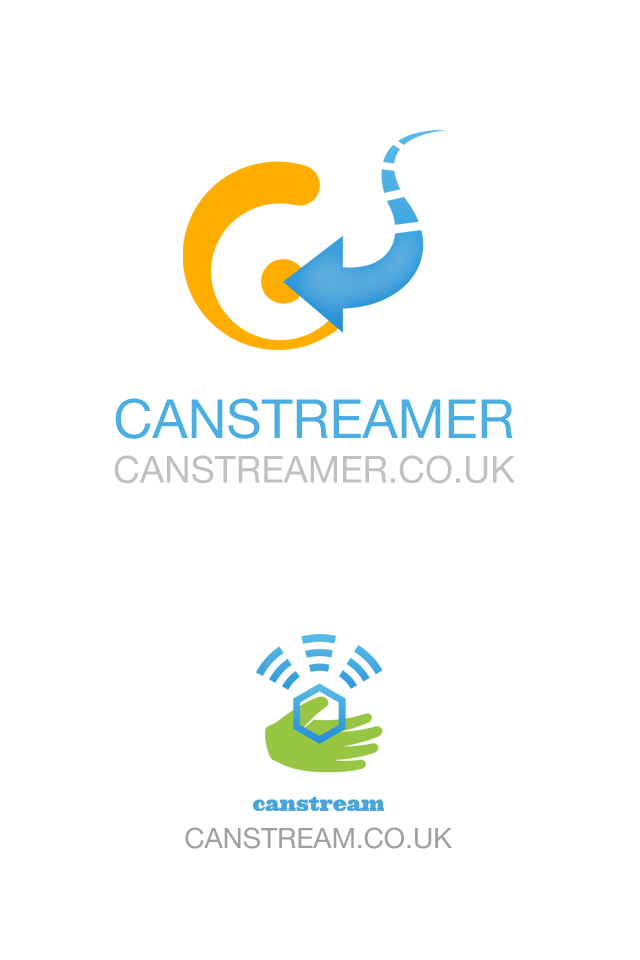
<style>
.page{position:relative;width:640px;height:960px;background:#ffffff}
.page>*{position:absolute;margin:0}
.t1{font:37px/38px "HelveticaNeue";color:#c0c0c0;text-transform:uppercase}
.t2{font:54px/38px "HelveticaNeue";color:#4baee3;text-transform:uppercase}
.t3{font:28px "HelveticaNeue";color:#a0a0a0;text-transform:uppercase}
</style>
<div class="page">
<p class="t1" style="left:114px;top:398px;width:401px;height:86px;text-align:center"><span class="t2">CANSTREAMER<br></span>canstreamER.co.uk</p>
<p class="t3" style="left:185px;top:827px;width:267px;height:22px">canstream.co.uk</p>
</div>
